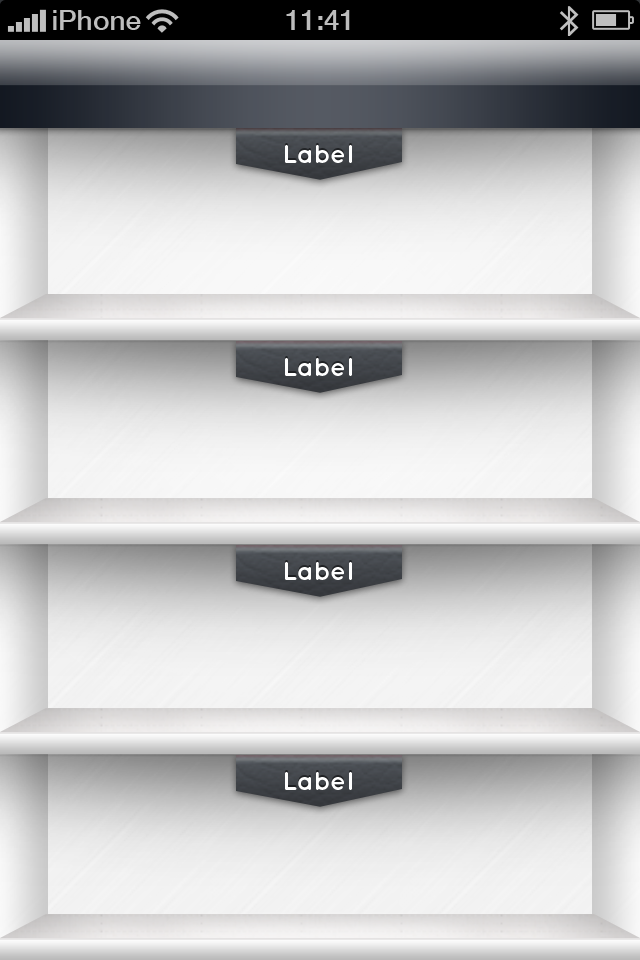
<style>
.page{position:relative;width:640px;height:960px}
.page>*{position:absolute;margin:0}
.t1{font:26px "QuicksandBold-Regular";color:#ffffff}
</style>
<div class="page">
<p class="t1" style="left:285px;top:145px;width:67px;height:18px">Label</p>
<p class="t1" style="left:285px;top:358px;width:67px;height:18px">Label</p>
<p class="t1" style="left:285px;top:562px;width:67px;height:18px">Label</p>
<p class="t1" style="left:285px;top:772px;width:67px;height:18px">Label</p>
</div>
